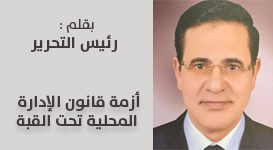
<style>
.page{position:relative;width:273px;height:150px;background:#d8d5d5}
.page>*{position:absolute;margin:0}
.t1{font:16px "TheSans-Bold";color:#3f3b3b}
.t2{font:14px "TheSans-Plain";color:#3f3b3b}
</style>
<div class="page">
<p class="t1" style="left:30px;top:19px;width:87px;height:33px;text-align:center"><span class="t2">بقلم :<br> </span>رئيس التحرير</p>
<p class="t1" style="left:16px;top:91px;width:124px;height:39px;text-align:center">أزمة قانون الإدارة <br>المحلية تحت القبة</p>
</div>
